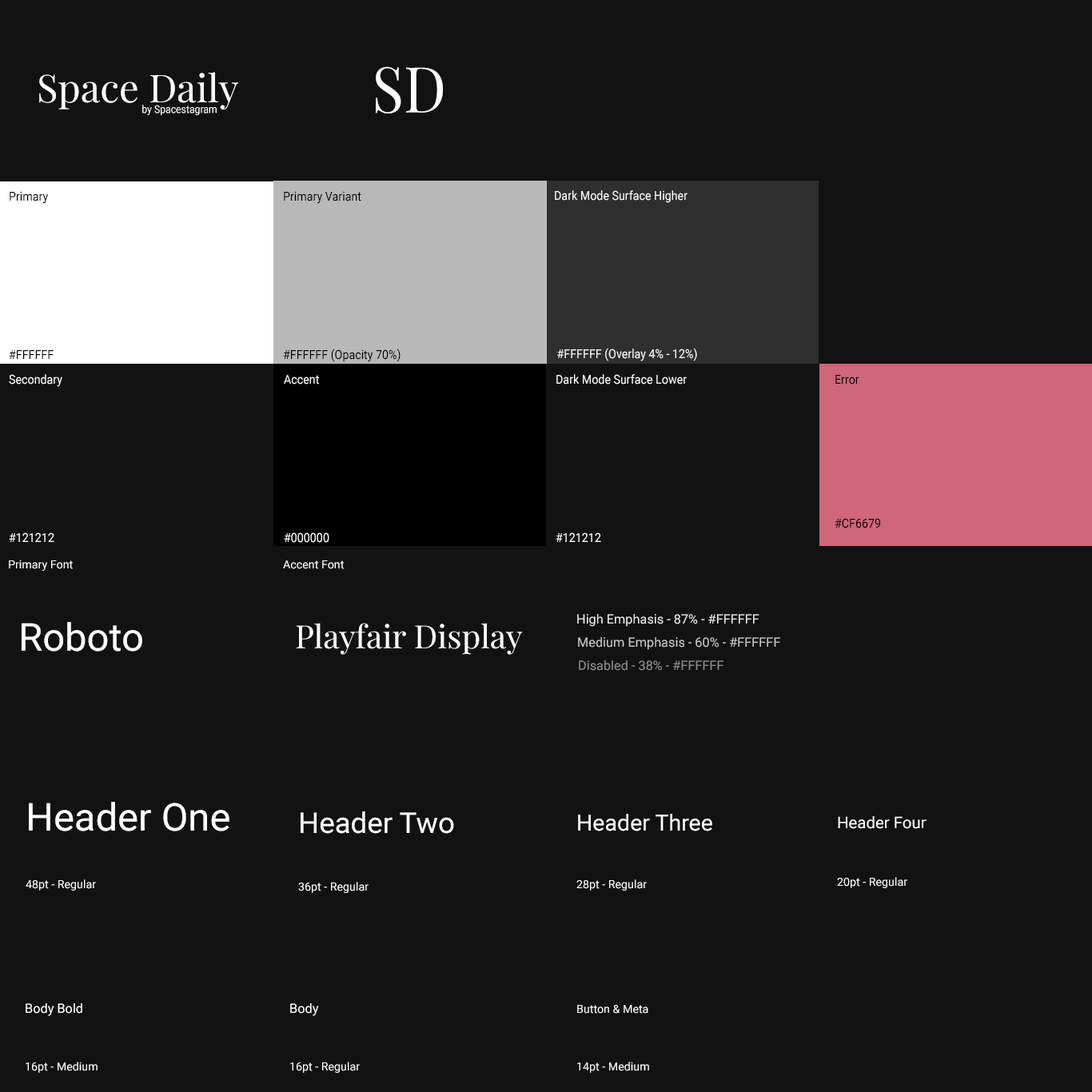
<style>
.page{position:relative;width:1092px;height:1092px;background:#121212}
.page>*{position:absolute;margin:0}
.t1{font:38.4px "PlayfairDisplay-Regular";color:#ffffff}
.t2{font:63.3px "PlayfairDisplay-Regular";color:#ffffff;scale:0.93 1}
.t3{font:10.6px "Roboto-Regular";color:#ffffff;scale:0.93 1}
.t4{font:12.3px/14.4px "Roboto-Regular";color:#000000;scale:0.93 1}
.t5{font:12.3px/14.4px "Roboto-Regular";color:#ffffff;scale:0.93 1}
.t6{font:11.2px "Roboto-Regular";color:#ffffff}
.t7{font:12.8px "Roboto-Regular";color:#ffffff}
.t8{font:38.4px "Roboto-Regular";color:#ffffff}
.t9{font:32px "PlayfairDisplay-Regular";color:#ffffff}
.t10{font:12.8px "Roboto-Regular";color:#c7c7c7}
.t11{font:12.8px "Roboto-Regular";color:#8c8c8c}
.t12{font:11.2px/14.4px "Roboto-Regular";color:#ffffff}
.t13{font:38.4px/14.4px "Roboto-Regular";color:#ffffff}
.t14{font:28.8px/14.4px "Roboto-Regular";color:#ffffff}
.t15{font:22.4px/14.4px "Roboto-Regular";color:#ffffff}
.t16{font:16px/14.4px "Roboto-Regular";color:#ffffff}
.t17{font:12.8px/14.4px "Roboto-Regular";color:#ffffff}
</style>
<div class="page">
<p class="t1" style="left:39px;top:72px;width:199px;height:38px">Space Daily</p>
<p class="t2" style="left:375px;top:66px;width:68px;height:48px">SD</p>
<p class="t3" style="left:142px;top:105px;width:75px;height:10px">by Spacestagram</p>
<p class="t4" style="left:9px;top:191px;width:45px;height:168px">Primary<br><br><br><br><br><br><br><br><br><br><br>#FFFFFF</p>
<p class="t4" style="left:283px;top:191px;width:118px;height:171px">Primary Variant<br><br><br><br><br><br><br><br><br><br><br>#FFFFFF (Opacity 70%)</p>
<p class="t5" style="left:555px;top:190px;width:142px;height:171px">Dark Mode Surface Higher<br><br><br><br><br><br><br><br><br><br><br> #FFFFFF (Overlay 4% - 12%)</p>
<p class="t5" style="left:9px;top:374px;width:53px;height:168px">Secondary<br><br><br><br><br><br><br><br><br><br><br>#121212</p>
<p class="t5" style="left:284px;top:375px;width:45px;height:168px">Accent<br><br><br><br><br><br><br><br><br><br><br>#000000</p>
<p class="t5" style="left:556px;top:374px;width:131px;height:168px">Dark Mode Surface Lower<br><br><br><br><br><br><br><br><br><br> <br>#121212</p>
<p class="t4" style="left:835px;top:375px;width:45px;height:153px">Error<br><br><br><br><br><br><br><br><br><br>#CF6679</p>
<p class="t6" style="left:9px;top:560px;width:64px;height:11px">Primary Font</p>
<p class="t6" style="left:283px;top:560px;width:61px;height:9px">Accent Font</p>
<p class="t7" style="left:577px;top:614px;width:182px;height:13px;opacity:0.87">High Emphasis - 87% - #FFFFFF</p>
<p class="t8" style="left:22px;top:622px;width:120px;height:30px">Roboto</p>
<p class="t9" style="left:296px;top:623px;width:227px;height:32px">Playfair Display</p>
<p class="t10" style="left:578px;top:637px;width:202px;height:13px">Medium Emphasis - 60% - #FFFFFF</p>
<p class="t11" style="left:579px;top:660px;width:144px;height:11px">Disabled - 38% - #FFFFFF</p>
<p class="t12" style="left:26px;top:802px;width:203px;height:89px"><span class="t13">Header One<br><br><br><br></span>48pt - Regular</p>
<p class="t12" style="left:298px;top:811px;width:156px;height:82px"><span class="t14">Header Two<br><br><br><br></span>36pt - Regular</p>
<p class="t12" style="left:576px;top:814px;width:136px;height:77px"><span class="t15">Header Three<br><br><br><br></span>28pt - Regular</p>
<p class="t12" style="left:837px;top:816px;width:90px;height:72px"><span class="t16">Header Four<br><br><br><br></span>20pt - Regular</p>
<p class="t12" style="left:26px;top:1003px;width:72px;height:70px"><span class="t17">Body Bold<br><br><br><br></span>16pt - Medium</p>
<p class="t12" style="left:290px;top:1003px;width:70px;height:70px"><span class="t17">Body<br><br><br><br></span>16pt - Regular</p>
<p class="t12" style="left:577px;top:1005px;width:72px;height:68px">Button &amp; Meta<br><br><br><br>14pt - Medium</p>
</div>
